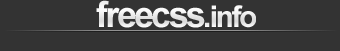
<style>
.page{position:relative;width:340px;height:51px;background:#333333}
.page>*{position:absolute;margin:0}
.t1{font:36px "Arial-BoldMT";letter-spacing:-0.075em;color:#ededed}
.t2{font:30px "Arial-BoldMT";letter-spacing:-0.075em;color:#ededed}
</style>
<div class="page">
<p class="t1" style="left:96px;top:0px;width:160px;height:28px">freecss<span class="t2">.info</span></p>
</div>
